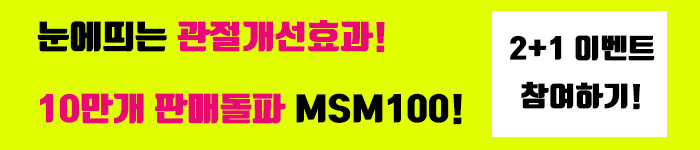
<style>
.page{position:relative;width:700px;height:150px;background:#e1ff00}
.page>*{position:absolute;margin:0}
.t1{font:32.4px/72px "TmonMonsoriBlack";color:#e90973;scale:1.11 1}
.t2{font:32.4px/72px "TmonMonsoriBlack";color:#000000;scale:1.11 1}
.t3{font:27px/48px "TmonMonsoriBlack";color:#000000;scale:1.11 1}
</style>
<div class="page">
<p class="t1" style="left:37px;top:20px;width:425px;height:105px"><span class="t2">눈에띄는 </span>관절개선효과!<br>10만개 판매돌파 <span class="t2">MSM100!</span></p>
<p class="t3" style="left:510px;top:35px;width:145px;height:75px;text-align:center">2+1 이벤트<br>참여하기!</p>
</div>
